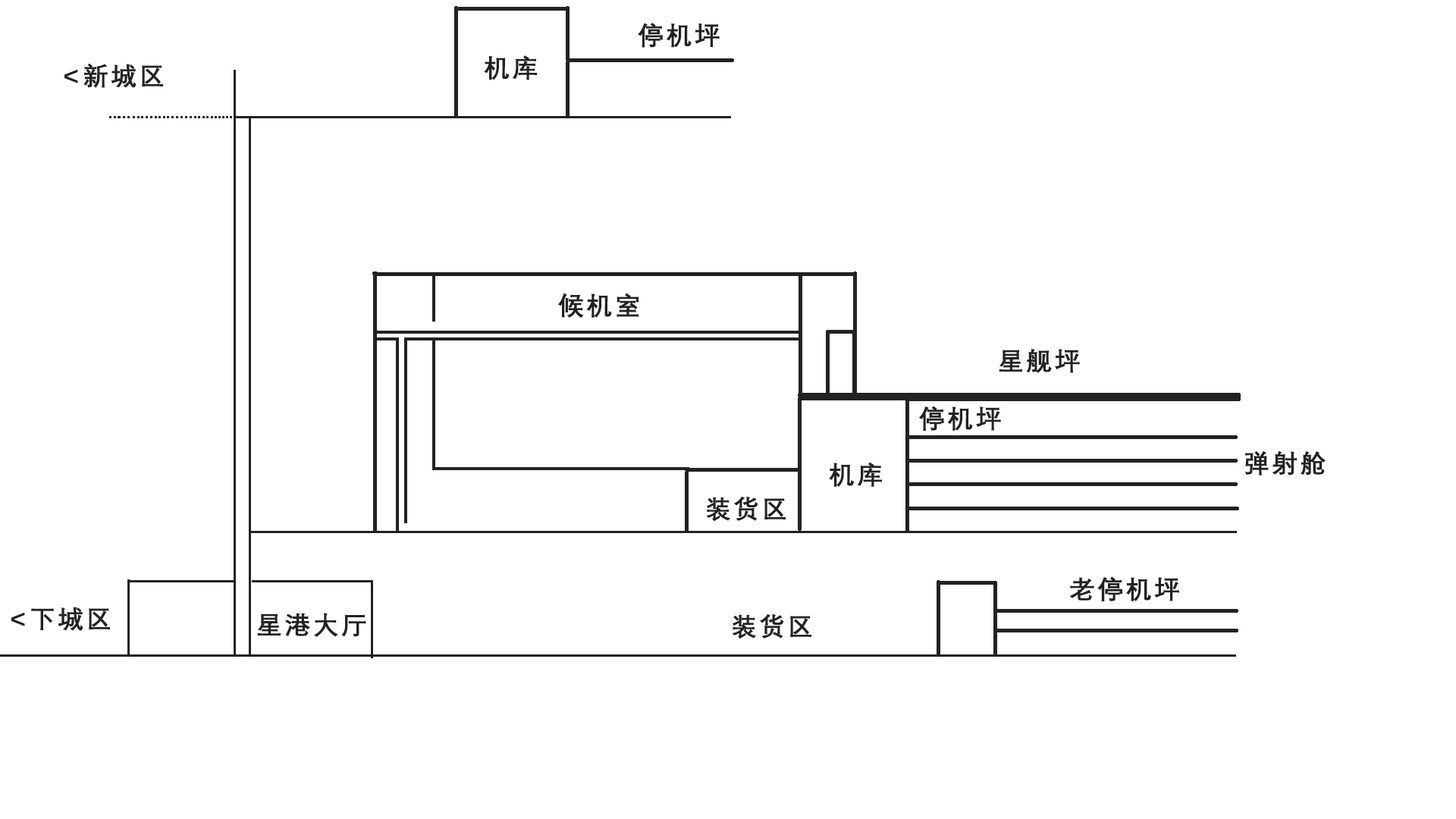
<style>
.page{position:relative;width:1456px;height:819px;background:#ffffff}
.page>*{position:absolute;margin:0}
.t1{font:25.8px "DengXian-Bold";letter-spacing:0.1em;color:#222222}
</style>
<div class="page">
<p class="t1" style="left:638px;top:23px;width:82px;height:25px">停机坪</p>
<p class="t1" style="left:64px;top:63px;width:99px;height:25px">&lt;新城区</p>
<p class="t1" style="left:484px;top:55px;width:54px;height:25px">机库</p>
<p class="t1" style="left:558px;top:293px;width:81px;height:25px">候机室</p>
<p class="t1" style="left:999px;top:349px;width:81px;height:24px">星舰坪</p>
<p class="t1" style="left:918px;top:406px;width:83px;height:25px">停机坪</p>
<p class="t1" style="left:829px;top:462px;width:53px;height:25px">机库</p>
<p class="t1" style="left:1244px;top:450px;width:82px;height:25px">弹射舱</p>
<p class="t1" style="left:706px;top:496px;width:80px;height:26px">装货区</p>
<p class="t1" style="left:1069px;top:576px;width:110px;height:25px">老停机坪</p>
<p class="t1" style="left:11px;top:607px;width:99px;height:24px">&lt;下城区</p>
<p class="t1" style="left:257px;top:613px;width:109px;height:24px">星港大厅</p>
<p class="t1" style="left:732px;top:613px;width:79px;height:26px">装货区</p>
</div>
